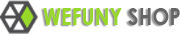
<style>
.page{position:relative;width:180px;height:36px;background:#ffffff}
.page>*{position:absolute;margin:0}
.t1{font:24px "CenturyGothic-Bold";color:#98d82a;scale:0.85 1}
.t2{font:24px "CenturyGothic-Bold";color:#656565;scale:0.85 1}
</style>
<div class="page">
<p class="t1" style="left:43px;top:8px;width:137px;height:17px">WEFUNY<span class="t2"> SHOP</span></p>
</div>
